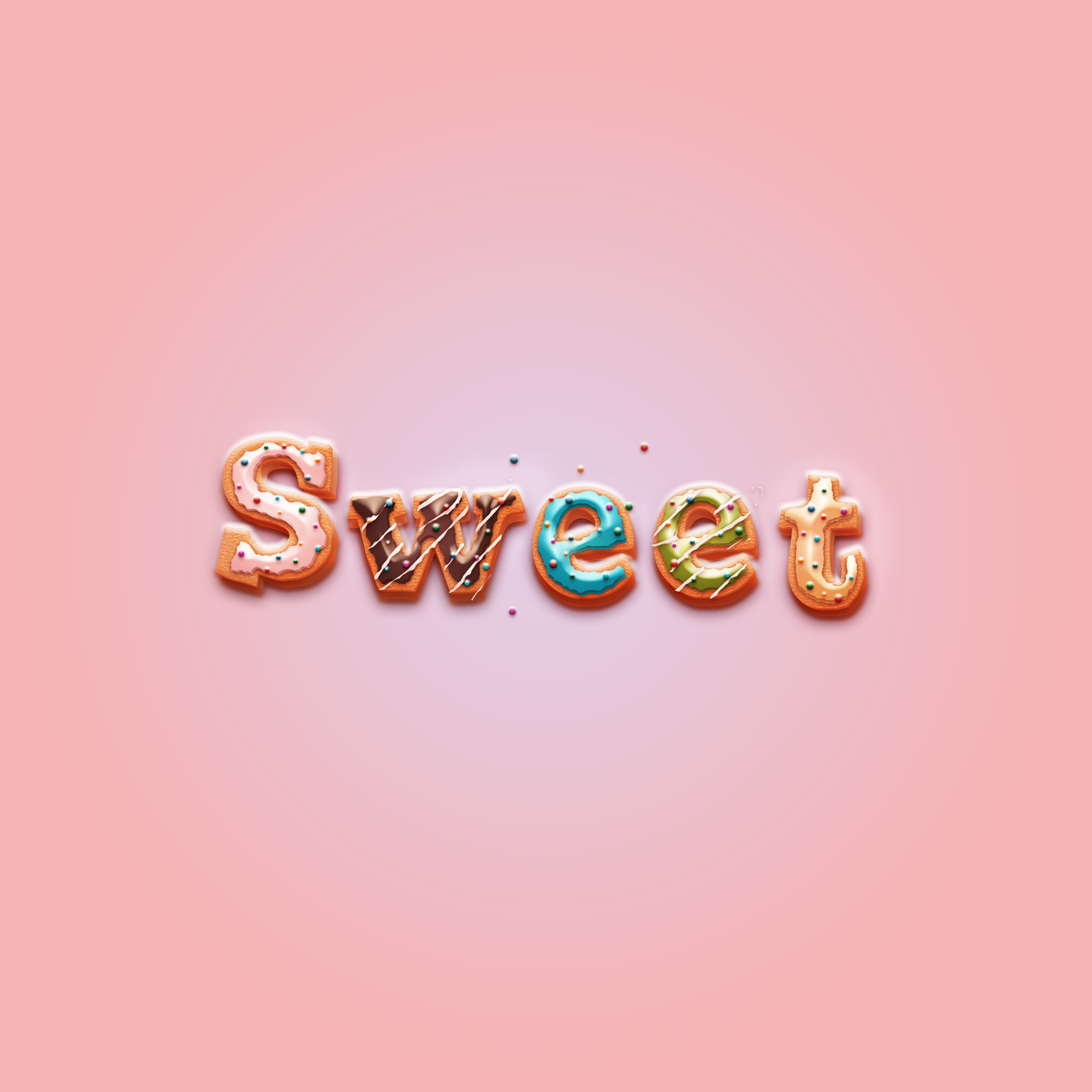
<style>
.page{position:relative;width:1092px;height:1092px;background:#f5b3b4}
.page>*{position:absolute;margin:0}
.t1{font:204.7px "JointbyPizzaDude"}
</style>
<div class="page">
<p class="t1" style="left:215px;top:436px;width:118px;height:150px">S</p>
<p class="t1" style="left:216px;top:438px;width:118px;height:149px">S</p>
<p class="t1" style="left:532px;top:486px;width:101px;height:111px">e</p>
<p class="t1" style="left:782px;top:482px;width:85px;height:134px">t</p>
<p class="t1" style="left:347px;top:489px;width:177px;height:103px">w</p>
<p class="t1" style="left:348px;top:490px;width:177px;height:104px">w</p>
<p class="t1" style="left:349px;top:498px;width:177px;height:104px">w</p>
<p class="t1" style="left:533px;top:488px;width:101px;height:111px">e</p>
<p class="t1" style="left:535px;top:495px;width:101px;height:112px">e</p>
<p class="t1" style="left:657px;top:495px;width:101px;height:111px">e</p>
</div>
